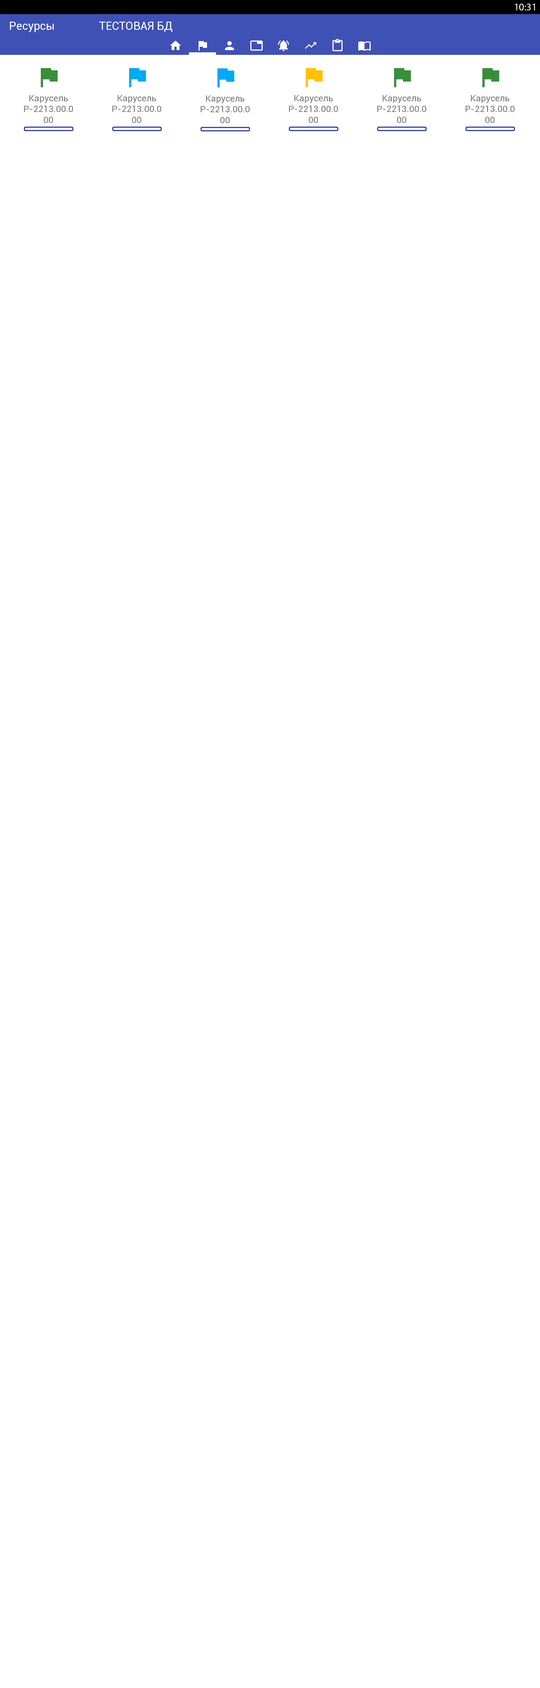
<style>
.page{position:relative;width:540px;height:1688px;background:#ffffff}
.page>*{position:absolute;margin:0}
.t1{font:10.1px "MyriadPro-Regular";color:#ffffff}
.t2{font:11.2px "Roboto-Regular";color:#ffffff}
.t3{font:9px "Roboto-Regular";color:#757575}
</style>
<div class="page">
<p class="t1" style="left:515px;top:4px;width:20px;height:6px">10:31</p>
<p class="t2" style="left:10px;top:22px;width:44px;height:10px">Ресурсы</p>
<p class="t2" style="left:99px;top:22px;width:73px;height:10px">ТЕСТОВАЯ БД</p>
<p class="t3" style="left:24px;top:95px;width:49px;height:28px;text-align:center">Карусель<br>P-2213.00.0<br>00</p>
<p class="t3" style="left:112px;top:95px;width:49px;height:28px;text-align:center">Карусель<br>P-2213.00.0<br>00</p>
<p class="t3" style="left:201px;top:95px;width:49px;height:28px;text-align:center">Карусель<br>P-2213.00.0<br>00</p>
<p class="t3" style="left:289px;top:95px;width:49px;height:28px;text-align:center">Карусель<br>P-2213.00.0<br>00</p>
<p class="t3" style="left:377px;top:95px;width:49px;height:28px;text-align:center">Карусель<br>P-2213.00.0<br>00</p>
<p class="t3" style="left:465px;top:95px;width:50px;height:28px;text-align:center">Карусель<br>P-2213.00.0<br>00</p>
</div>
